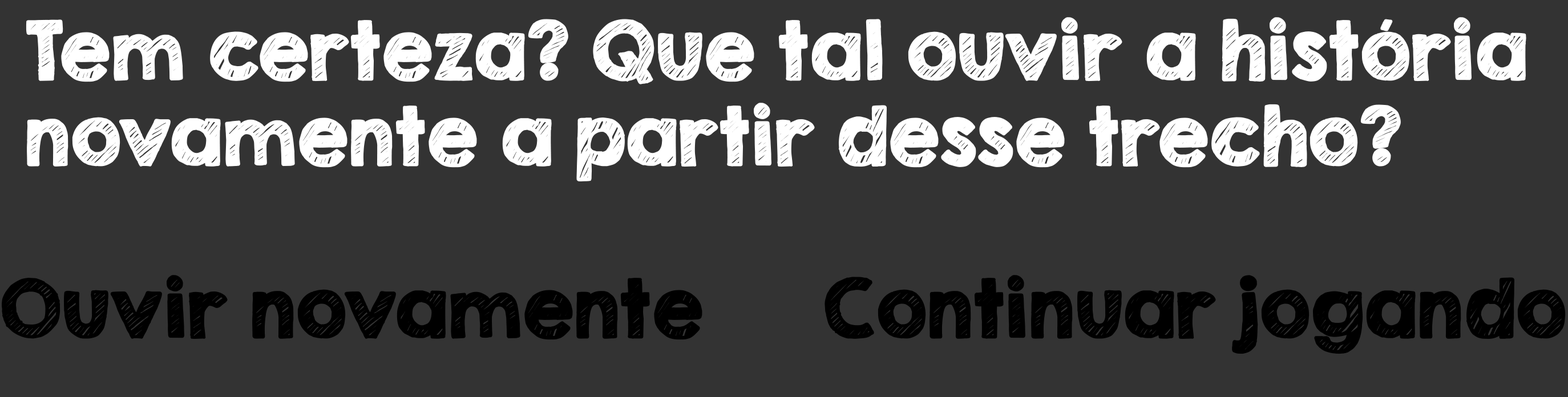
<style>
.page{position:relative;width:1568px;height:397px;background:#333333}
.page>*{position:absolute;margin:0}
.t1{font:71.3px "KGSecondChancesSketch";color:#ffffff;font-weight:bold}
.t2{font:71.3px "KGSecondChancesSketch";color:#000000;font-weight:bold}
</style>
<div class="page">
<p class="t1" style="left:26px;top:17px;width:1500px;height:164px">Tem certeza? Que tal ouvir a história<br>novamente a partir desse trecho?</p>
<p class="t2" style="left:2px;top:275px;width:700px;height:65px">Ouvir novamente</p>
<p class="t2" style="left:825px;top:275px;width:741px;height:79px">Continuar jogando</p>
</div>
